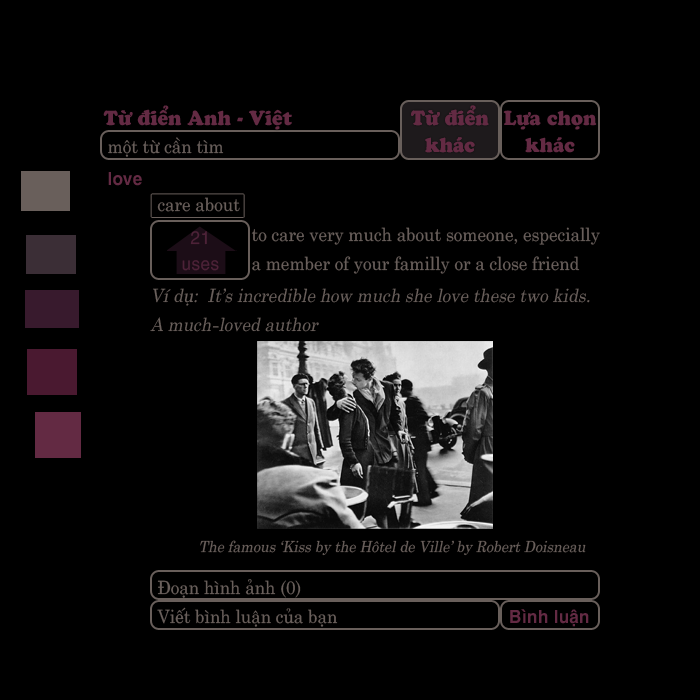
<style>
.page{position:relative;width:700px;height:700px;background:#000000}
.page>*{position:absolute;margin:0}
.t1{font:21.3px "UTM-Cooper-Black";color:#632a43;scale:0.93 1}
.t2{font:18.2px "UTM-Centur";color:#695f5b;scale:0.93 1}
.t3{font:18.2px "UTMHelveBold";color:#632a43;scale:0.93 1}
.t4{font:18.2px "UTM-Helve";color:#632a43;scale:0.93 1}
.t5{font:18.2px "UTMCentur-Italic";color:#695f5b;scale:0.93 1}
.t6{font:15.2px "UTMCentur-Italic";color:#695f5b;scale:0.93 1}
</style>
<div class="page">
<p class="t1" style="left:103px;top:105px;width:189px;height:25px">Từ điển Anh - Việt</p>
<p class="t1" style="left:411px;top:105px;width:78px;height:21px">Từ điển</p>
<p class="t1" style="left:411px;top:105px;width:78px;height:21px">Từ điển</p>
<p class="t1" style="left:503px;top:110px;width:94px;height:20px">Lựa chọn</p>
<p class="t2" style="left:108px;top:137px;width:116px;height:20px">một từ cần tìm</p>
<p class="t1" style="left:425px;top:137px;width:50px;height:16px">khác</p>
<p class="t1" style="left:425px;top:137px;width:50px;height:16px">khác</p>
<p class="t1" style="left:525px;top:137px;width:50px;height:16px">khác</p>
<p class="t3" style="left:108px;top:172px;width:34px;height:14px">love</p>
<p class="t2" style="left:157px;top:197px;width:83px;height:15px">care about</p>
<p class="t4" style="left:190px;top:231px;width:17px;height:14px">21</p>
<p class="t2" style="left:251px;top:227px;width:349px;height:18px">to care very much about someone, especially</p>
<p class="t2" style="left:252px;top:256px;width:328px;height:18px">a member of your familly or a close friend</p>
<p class="t4" style="left:182px;top:260px;width:37px;height:11px">uses</p>
<p class="t5" style="left:153px;top:288px;width:437px;height:18px">Ví dụ:  It’s incredible how much she love these two kids.</p>
<p class="t5" style="left:150px;top:317px;width:169px;height:15px">A much-loved author</p>
<p class="t6" style="left:200px;top:540px;width:386px;height:16px">The famous ‘Kiss by the Hôtel de Ville’ by Robert Doisneau</p>
<p class="t2" style="left:157px;top:579px;width:144px;height:19px">Đoạn hình ảnh (0)</p>
<p class="t2" style="left:157px;top:607px;width:181px;height:20px">Viết bình luận của bạn</p>
<p class="t3" style="left:510px;top:609px;width:79px;height:18px">Bình luận</p>
</div>
